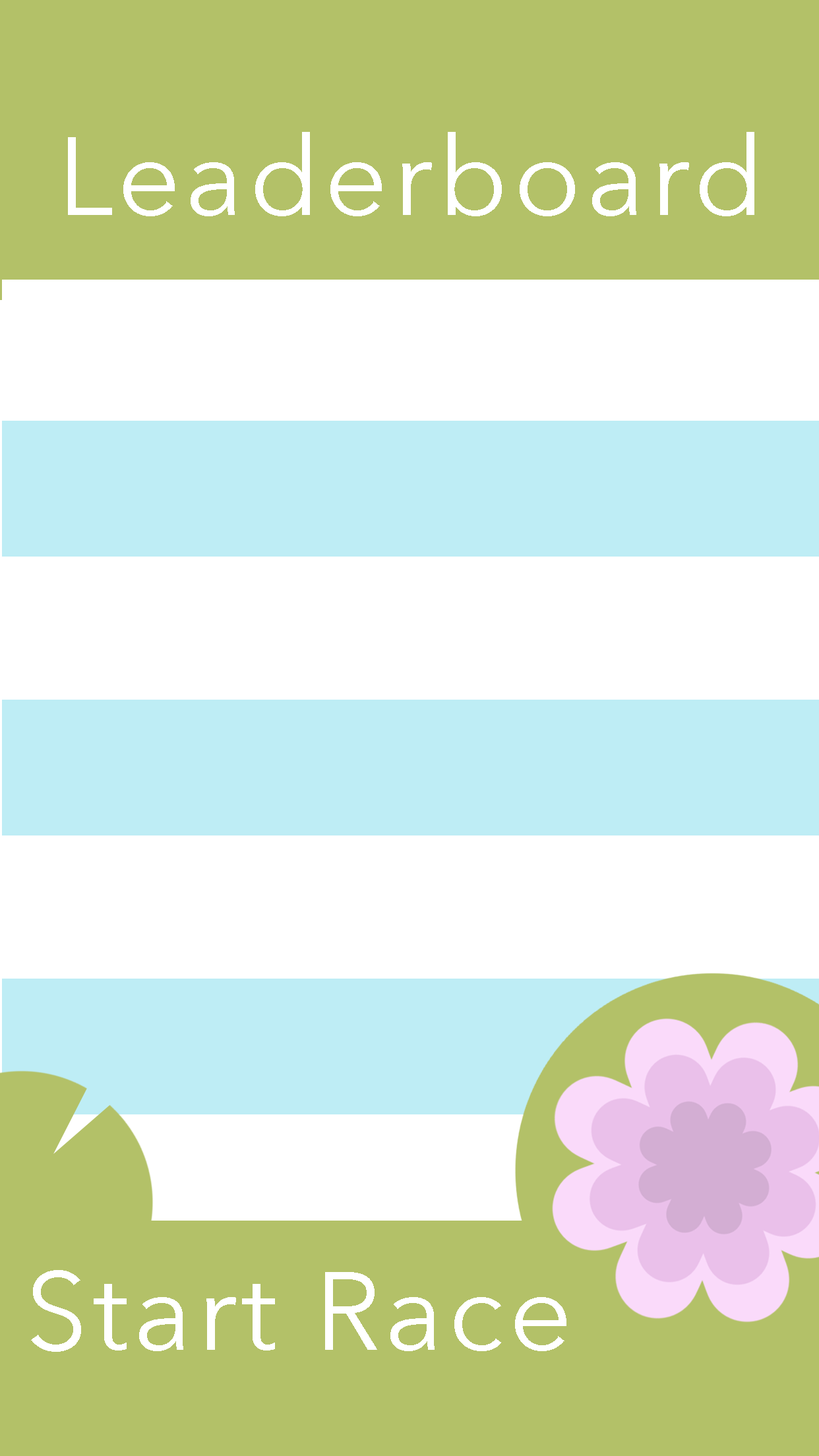
<style>
.page{position:relative;width:819px;height:1456px;background:#ffffff}
.page>*{position:absolute;margin:0}
.t1{font:109.9px "AvenirNext-Regular";letter-spacing:0.05em;color:#ffffff}
</style>
<div class="page">
<p class="t1" style="left:68px;top:132px;width:686px;height:84px">Leaderboard</p>
<p class="t1" style="left:31px;top:1270px;width:535px;height:82px">Start Race</p>
</div>
